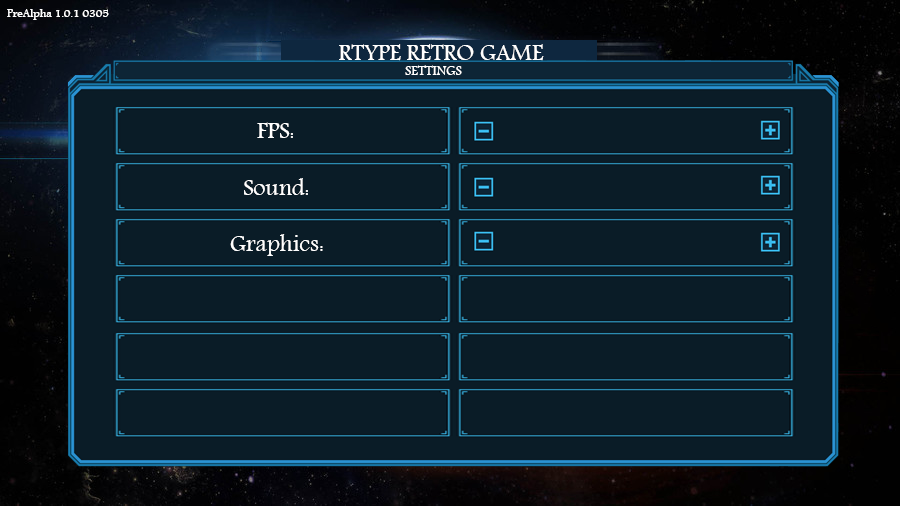
<style>
.page{position:relative;width:900px;height:506px;background:#0a1c27}
.page>*{position:absolute;margin:0}
.t1{font:24px "Andalus";color:#ffffff}
</style>
<div class="page">
<p class="t1" style="left:257px;top:122px;width:36px;height:16px">FPS:</p>
<p class="t1" style="left:244px;top:178px;width:64px;height:17px">Sound:</p>
<p class="t1" style="left:230px;top:234px;width:93px;height:22px">Graphics:</p>
</div>
